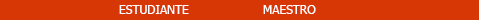
<style>
.page{position:relative;width:479px;height:20px;background:#d73605}
.page>*{position:absolute;margin:0}
.t1{font:12px "Tahoma";color:#ffffff}
</style>
<div class="page">
<p class="t1" style="left:119px;top:5px;width:197px;height:9px">ESTUDIANTE   MAESTRO</p>
</div>
